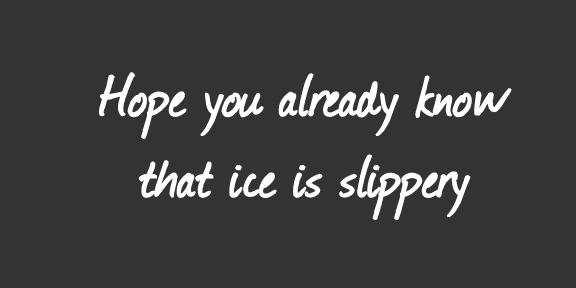
<style>
.page{position:relative;width:576px;height:288px;background:#333333}
.page>*{position:absolute;margin:0}
.t1{font:67.6px "Journal";color:#ffffff;font-weight:bold}
</style>
<div class="page">
<p class="t1" style="left:99px;top:72px;width:413px;height:148px;text-align:center">Hope you already know<br>that ice is slippery</p>
</div>
